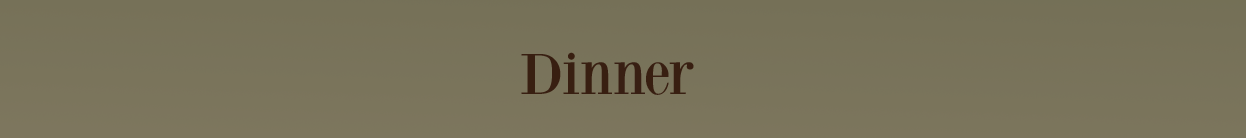
<style>
.page{position:relative;width:1246px;height:138px}
.page>*{position:absolute;margin:0}
.t1{font:60px "BodoniXT";color:#381f11}
.t2{font:60px "BodoniXT";color:#381f13}
</style>
<div class="page">
<p class="t1" style="left:521px;top:52px;width:173px;height:43px">Din<span class="t2">n</span>er</p>
</div>
